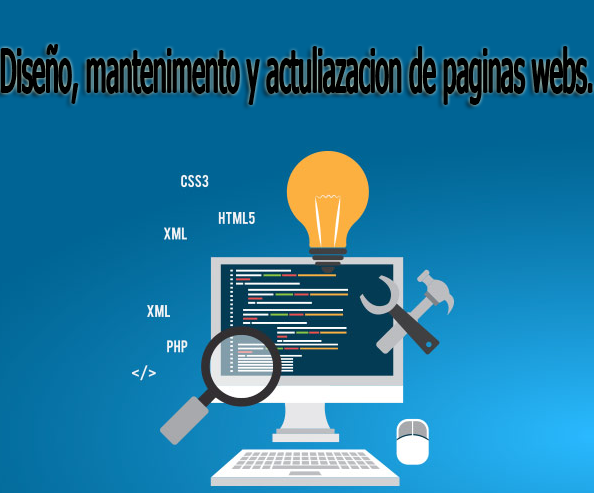
<style>
.page{position:relative;width:594px;height:493px;background:#006495}
.page>*{position:absolute;margin:0}
.t1{font:59.3px "Tahoma";color:#000000;scale:0.41 1}
</style>
<div class="page">
<p class="t1" style="left:1px;top:45px;width:591px;height:59px">Diseño, mantenimento y actuliazacion de paginas webs.</p>
</div>
